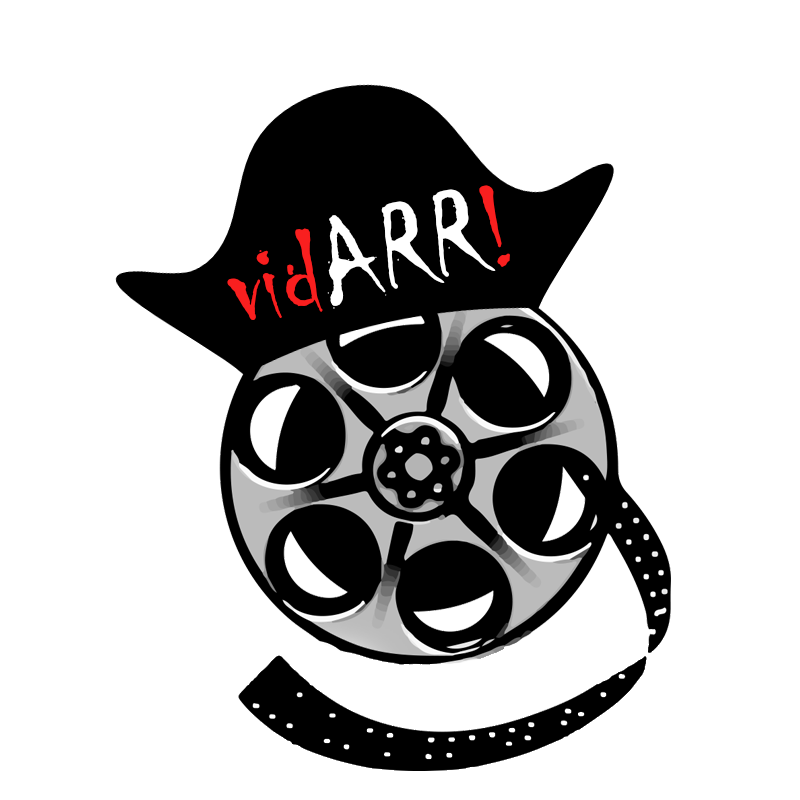
<style>
.page{position:relative;width:800px;height:800px;background:#ffffff}
.page>*{position:absolute;margin:0}
.t1{font:121.8px "Chiller-Regular";color:#f91f1f}
.t2{font:121.8px "Chiller-Regular";color:#ffffff}
</style>
<div class="page">
<p class="t1" style="left:227px;top:185px;width:283px;height:135px;rotate:-13deg">vid<span class="t2">ARR</span>!</p>
</div>
